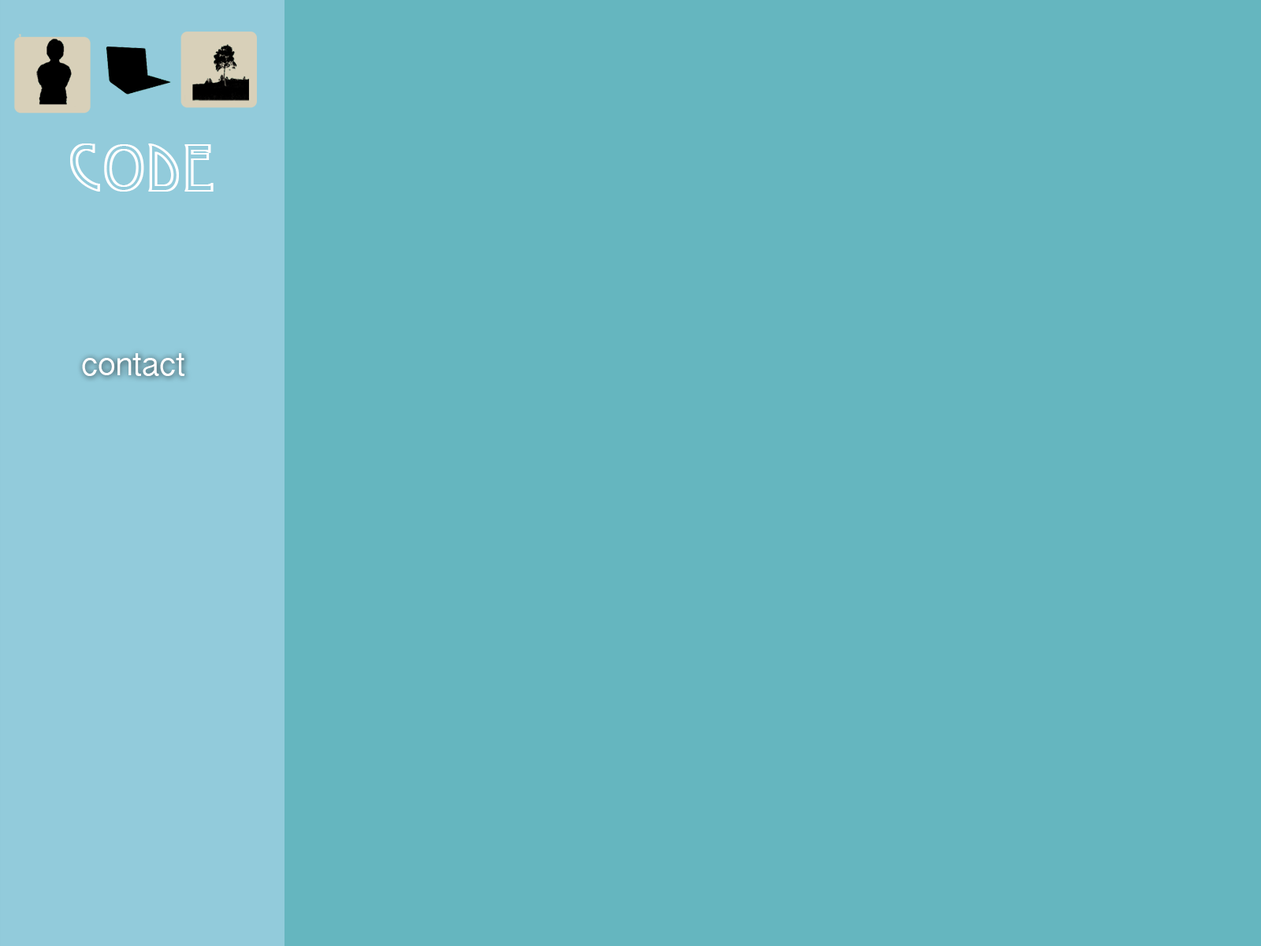
<style>
.page{position:relative;width:1261px;height:946px;background:#65b6bf}
.page>*{position:absolute;margin:0}
.t1{font:63px "Desdemona";color:#ffffff;font-weight:bold}
.t2{font:31.5px "KannadaSangamMN";color:#ffffff}
</style>
<div class="page">
<p class="t1" style="left:70px;top:143px;width:144px;height:49px">Code</p>
<p class="t2" style="left:82px;top:353px;width:102px;height:23px">contact</p>
</div>
